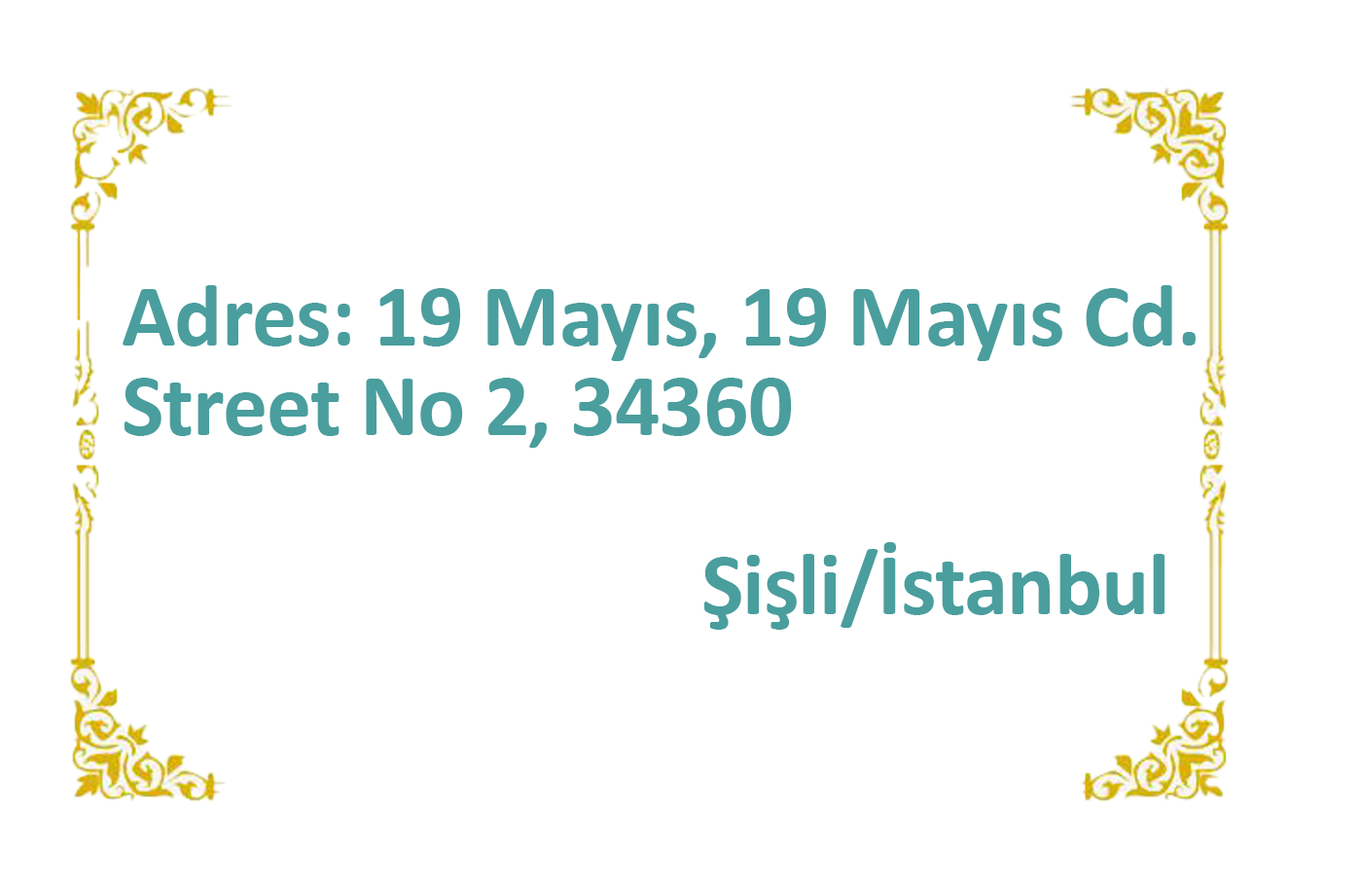
<style>
.page{position:relative;width:1362px;height:876px;background:#ffffff}
.page>*{position:absolute;margin:0}
.t1{font:89.4px/89.4px "Calibri-Bold";letter-spacing:-0.01em;color:#4a9e9e}
</style>
<div class="page">
<p class="t1" style="left:123px;top:285px;width:1073px;height:344px">Adres: 19 Mayıs, 19 Mayıs Cd. <br> Street No 2, 34360<br>  <br>                               Şişli/İstanbul</p>
</div>
